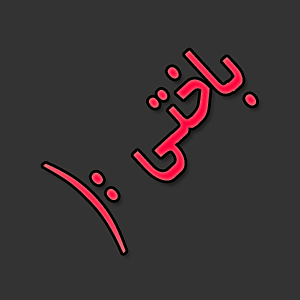
<style>
.page{position:relative;width:300px;height:300px;background:#333333}
.page>*{position:absolute;margin:0}
.t1{font:107.8px "BYekan";scale:0.64 1}
</style>
<div class="page">
<p class="t1" style="left:43px;top:50px;width:213px;height:203px;rotate:-43deg">باختی  :(</p>
</div>
